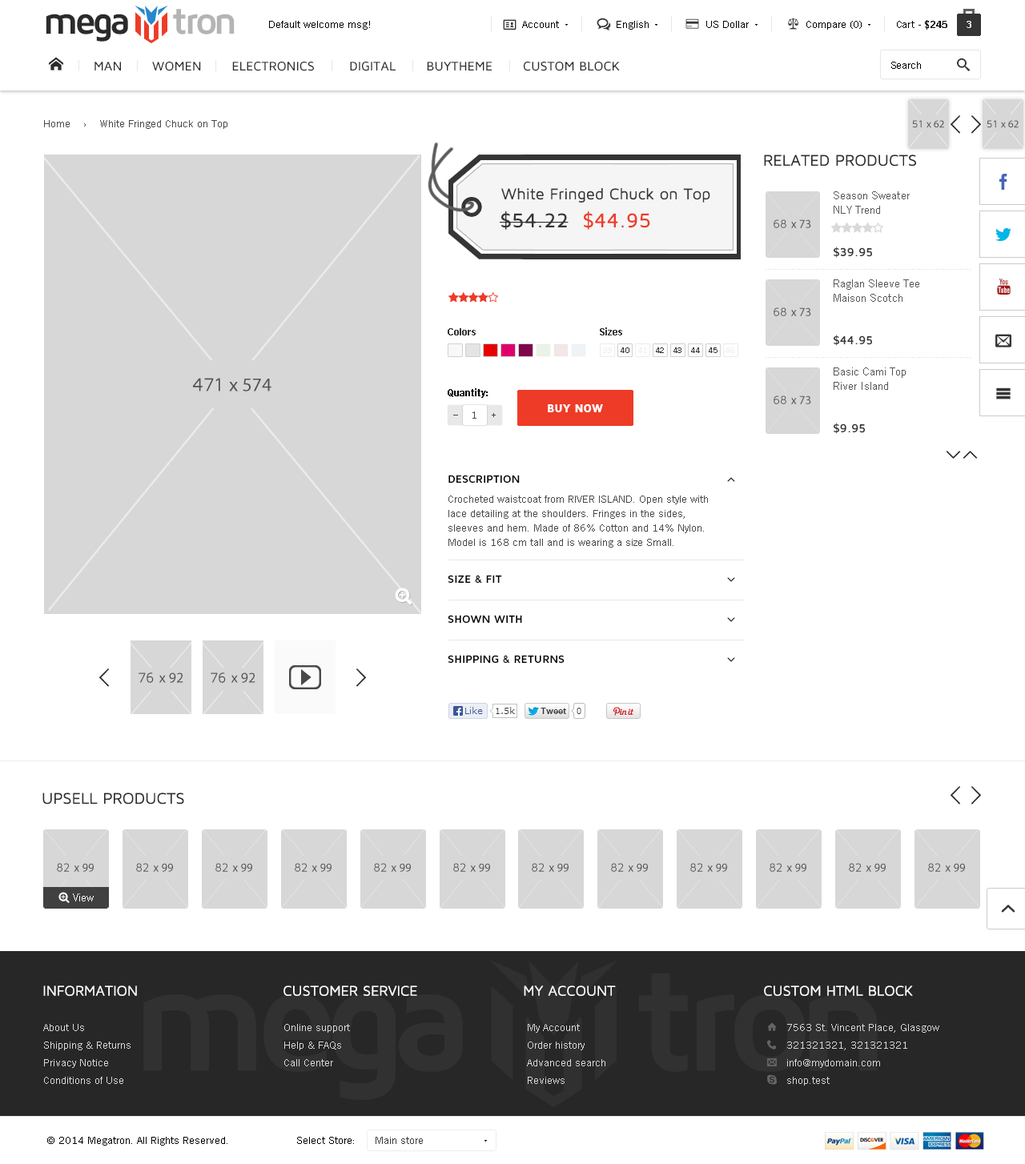
<style>
.page{position:relative;width:1025px;height:1164px;background:#ffffff}
.page>*{position:absolute;margin:0}
.t1{font:38.4px "MavenProBold";letter-spacing:-0.1em;color:#2b2b2b}
.t2{font:38.4px "MavenProBold";letter-spacing:-0.1em;color:#b4b4b4}
.t3{font:10.4px "TradeGothicW01-Roman";color:#000000}
.t4{font:10.4px "TradeGothicW01-Bold2";color:#000000}
.t5{font:9.6px "TradeGothicW01-Bold2";color:#ffffff}
.t6{font:10.4px "TradeGothicW01-Roman";color:#494949}
.t7{font:16px "MavenProRegular";color:#2b2b2b;text-transform:uppercase}
.t8{font:16px "MavenProRegular";color:#353535}
.t9{font:11.2px/14px "TradeGothicW01-Roman";color:#565656}
.t10{font:20.8px "MavenProMedium";color:#353535}
.t11{font:20.8px "MavenProMedium";color:#ee3b27}
.t12{font:12px "MavenProBold";color:#353535}
.t13{font:10.4px "TradeGothicW01-Bold2";color:#353535}
.t14{font:8px "TradeGothicW01-Roman";color:#efefef;text-transform:uppercase}
.t15{font:8px "TradeGothicW01-Roman";color:#353535;text-transform:uppercase}
.t16{font:8.8px "TradeGothicW01-Bold2";color:#494949}
.t17{font:11.2px "MavenProBlack";color:#ffffff}
.t18{font:11.2px/40px "MavenProBold";color:#000000;text-transform:uppercase}
.t19{font:11.2px/60px "MavenProBold";color:#000000;text-transform:uppercase}
.t20{font:10.4px/14.4px "TradeGothicW01-Roman";color:#494949}
.t21{font:11.2px "TradeGothicW01-Roman";color:#ffffff}
.t22{font:14.4px "MavenProRegular";color:#ffffff;text-transform:uppercase}
.t23{font:10.4px/17.6px "TradeGothicW01-Roman";color:#d9d9d9}
.t24{font:10.4px "TradeGothicW01-Roman";color:#3c3c3c}
</style>
<div class="page">
<p class="t1" style="left:46px;top:9px;width:189px;height:33px">mega     <span class="t2">tron</span></p>
<p class="t3" style="left:269px;top:21px;width:101px;height:9px">Default welcome msg!</p>
<p class="t3" style="left:522px;top:21px;width:37px;height:7px">Account</p>
<p class="t3" style="left:616px;top:21px;width:32px;height:9px">English</p>
<p class="t3" style="left:706px;top:21px;width:42px;height:7px">US Dollar</p>
<p class="t3" style="left:806px;top:21px;width:55px;height:9px">Compare (0)</p>
<p class="t3" style="left:896px;top:20px;width:51px;height:10px">Cart - <span class="t4">$245</span></p>
<p class="t5" style="left:966px;top:21px;width:5px;height:7px">3</p>
<p class="t3" style="left:891px;top:62px;width:30px;height:7px">Search</p>
<p class="t6" style="left:44px;top:120px;width:183px;height:9px">Home    ›    White Fringed Chuck on Top</p>
<p class="t7" style="left:764px;top:154px;width:152px;height:12px">Related PRODUCTS</p>
<p class="t8" style="left:501px;top:188px;width:209px;height:15px">White Fringed Chuck on Top</p>
<p class="t9" style="left:833px;top:191px;width:76px;height:23px">Season Sweater<br>NLY Trend</p>
<p class="t10" style="left:499px;top:211px;width:151px;height:19px">$54.22  <span class="t11">$44.95</span></p>
<p class="t12" style="left:833px;top:247px;width:39px;height:11px">$39.95</p>
<p class="t9" style="left:833px;top:279px;width:86px;height:23px">Raglan Sleeve Tee <br>Maison Scotch</p>
<p class="t13" style="left:447px;top:328px;width:28px;height:7px">Colors</p>
<p class="t13" style="left:600px;top:327px;width:22px;height:8px">Sizes</p>
<p class="t12" style="left:833px;top:335px;width:39px;height:11px">$44.95</p>
<p class="t14" style="left:603px;top:347px;width:9px;height:6px">39</p>
<p class="t15" style="left:620px;top:347px;width:9px;height:6px">40</p>
<p class="t14" style="left:638px;top:347px;width:8px;height:6px">41</p>
<p class="t15" style="left:656px;top:347px;width:8px;height:6px">42</p>
<p class="t15" style="left:673px;top:347px;width:8px;height:6px">43</p>
<p class="t15" style="left:691px;top:347px;width:9px;height:6px">44</p>
<p class="t15" style="left:708px;top:347px;width:9px;height:6px">45</p>
<p class="t14" style="left:725px;top:347px;width:9px;height:6px">46</p>
<p class="t9" style="left:833px;top:367px;width:72px;height:23px">Basic Cami Top<br>River Island</p>
<p class="t4" style="left:447px;top:388px;width:40px;height:10px">Quantity:</p>
<p class="t6" style="left:472px;top:411px;width:4px;height:8px">1</p>
<p class="t16" style="left:491px;top:413px;width:4px;height:4px">+</p>
<p class="t17" style="left:548px;top:404px;width:55px;height:8px">BUY NOW</p>
<p class="t12" style="left:833px;top:423px;width:31px;height:11px">$9.95</p>
<p class="t18" style="left:447px;top:475px;width:117px;height:188px">Description<br><br><span class="t19">Size &amp; Fit<br></span>Shown With<br>Shipping &amp; Returns</p>
<p class="t20" style="left:448px;top:495px;width:260px;height:53px">Crocheted waistcoat from RIVER ISLAND. Open style with lace detailing at the shoulders. Fringes in the sides, sleeves and hem. Made of 86% Cotton and 14% Nylon. Model is 168 cm tall and is wearing a size Small.</p>
<p class="t7" style="left:42px;top:792px;width:142px;height:12px">UPSELL PRODUCTS</p>
<p class="t21" style="left:73px;top:893px;width:21px;height:8px">View</p>
<p class="t22" style="left:43px;top:985px;width:94px;height:11px">Information</p>
<p class="t22" style="left:283px;top:985px;width:134px;height:11px">customer service</p>
<p class="t22" style="left:523px;top:985px;width:93px;height:11px">My account</p>
<p class="t22" style="left:764px;top:985px;width:149px;height:11px">CUSTOM HTML BLOCK</p>
<p class="t23" style="left:43px;top:1024px;width:87px;height:60px">About Us<br>Shipping &amp; Returns<br>Privacy Notice<br>Conditions of Use</p>
<p class="t23" style="left:284px;top:1024px;width:66px;height:42px">Online support<br>Help &amp; FAQs<br>Call Center</p>
<p class="t23" style="left:527px;top:1024px;width:78px;height:60px">My Account<br>Order history<br>Advanced search<br>Reviews</p>
<p class="t23" style="left:787px;top:1024px;width:152px;height:61px">7563 St. Vincent Place, Glasgow<br>321321321, 321321321<br>info@mydomain.com<br>shop.test</p>
<p class="t3" style="left:47px;top:1137px;width:180px;height:8px">© 2014 Megatron. All Rights Reserved.</p>
<p class="t3" style="left:297px;top:1137px;width:57px;height:7px">Select Store:</p>
<p class="t24" style="left:375px;top:1137px;width:48px;height:7px">Main store</p>
</div>
